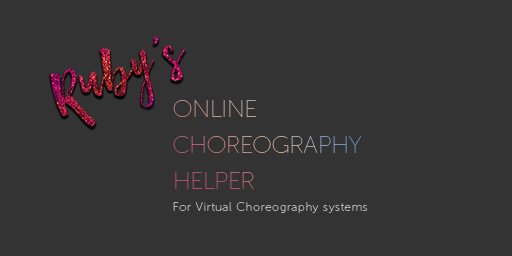
<style>
.page{position:relative;width:512px;height:256px;background:#333333}
.page>*{position:absolute;margin:0}
.t1{font:24px/36px "MuseoSansDisplay-Hairline";letter-spacing:0.025em}
.t2{font:12px "MuseoSansDisplay-Hairline";letter-spacing:0.075em;color:#e0dbe1}
</style>
<div class="page">
<p class="t1" style="left:173px;top:100px;width:189px;height:89px">ONLINE <br>CHOREOGRAPHY<br>HELPER</p>
<p class="t2" style="left:173px;top:202px;width:195px;height:11px">For Virtual Choreography systems</p>
</div>
